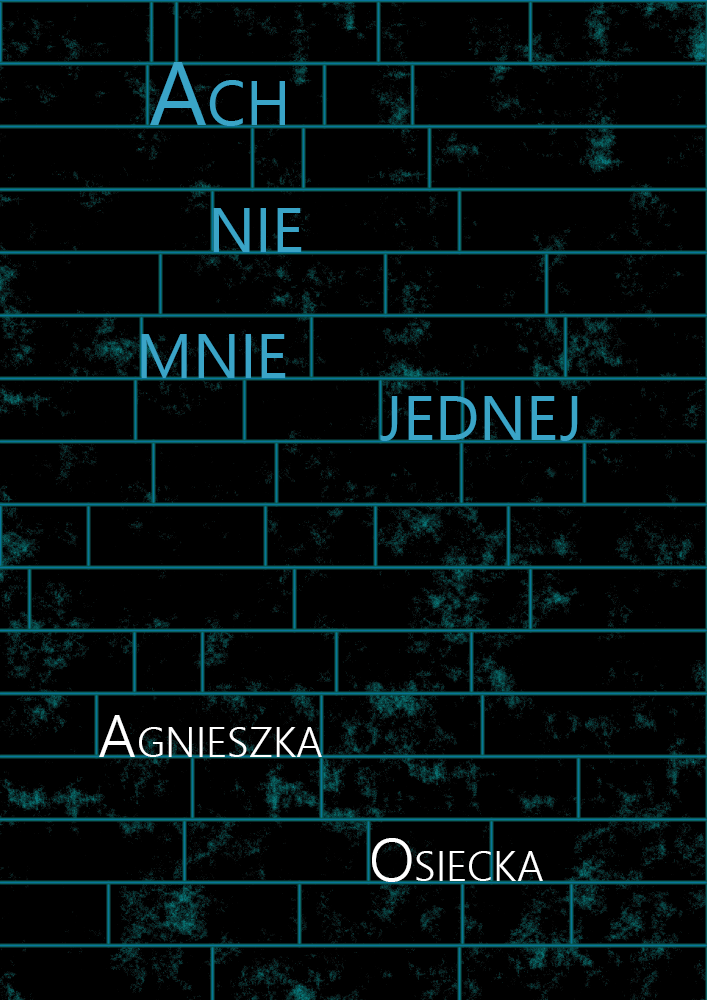
<style>
.page{position:relative;width:707px;height:1000px;background:#000000}
.page>*{position:absolute;margin:0}
.t1{font:90px "NirmalaUI";color:#3aa4c7;font-variant:small-caps}
.t2{font:60px "NirmalaUI-Semilight";color:#ffffff;font-variant:small-caps}
</style>
<div class="page">
<p class="t1" style="left:150px;top:62px;width:135px;height:64px">Ach</p>
<p class="t1" style="left:213px;top:208px;width:89px;height:44px">nie</p>
<p class="t1" style="left:141px;top:334px;width:145px;height:44px">mnie</p>
<p class="t1" style="left:380px;top:396px;width:198px;height:45px">jednej</p>
<p class="t2" style="left:99px;top:715px;width:223px;height:42px">Agnieszka</p>
<p class="t2" style="left:372px;top:838px;width:171px;height:44px">Osiecka</p>
</div>
